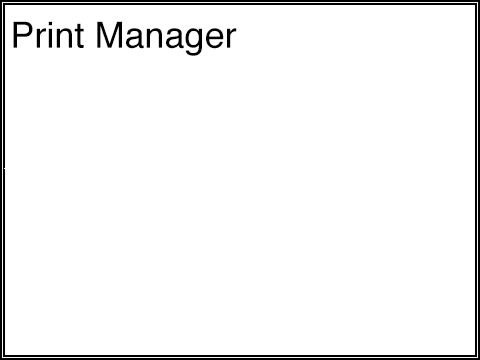
<style>
.page{position:relative;width:480px;height:360px;background:#ffffff}
.page>*{position:absolute;margin:0}
.t1{font:36px "Helvetica";color:#000000}
</style>
<div class="page">
<p class="t1" style="left:13px;top:21px;width:224px;height:35px">Print Manager</p>
</div>
